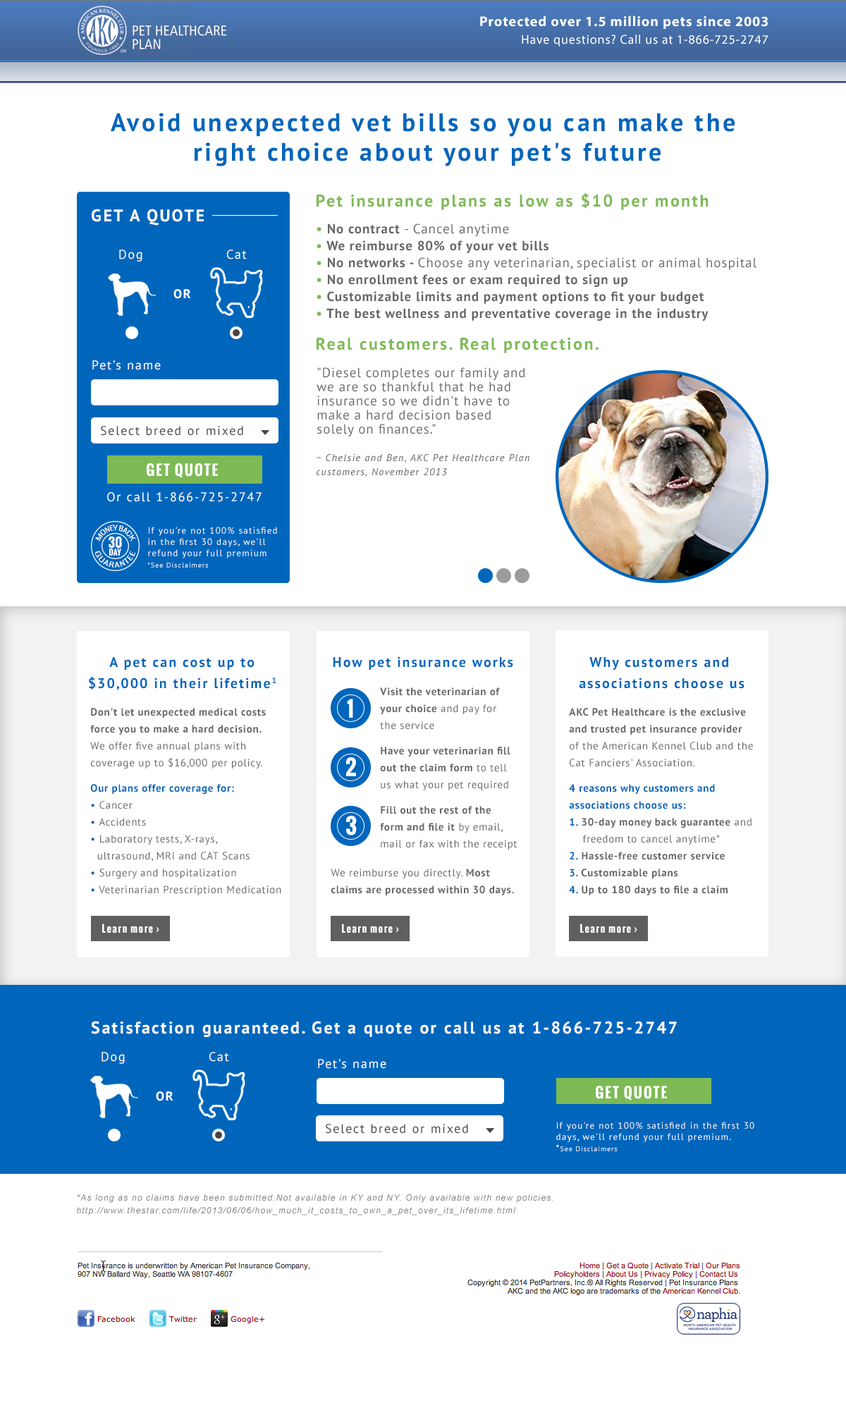
<style>
.page{position:relative;width:846px;height:1410px;background:#ffffff}
.page>*{position:absolute;margin:0}
.t1{font:14.1px "MyriadPro-Bold";letter-spacing:0.05em;color:#ffffff}
.t2{font:12.7px "MyriadPro-Regular";letter-spacing:0.05em;color:#ffffff}
.t3{font:25.4px/29.6px "PTSans-Bold";letter-spacing:0.1em;color:#0066bc}
.t4{font:16.9px "PTSans-Bold";letter-spacing:0.1em;color:#7dba55}
.t5{font:16.9px "PTSans-Bold";letter-spacing:0.1em;color:#ffffff}
.t6{font:13.4px/16.9px "PTSans-Bold";letter-spacing:0.05em;color:#666666}
.t7{font:13.4px/16.9px "PTSans-Bold";letter-spacing:0.05em;color:#7dba55}
.t8{font:13.4px/16.9px "PTSans-Regular";letter-spacing:0.05em;color:#666666}
.t9{font:12.7px "PTSans-Regular";letter-spacing:0.1em;color:#ffffff}
.t10{font:12.7px "PTSans-Bold";letter-spacing:0.1em;color:#ffffff}
.t11{font:13.4px/14.1px "PTSans-Regular";letter-spacing:0.05em;color:#666666}
.t12{font:12.7px "PTSans-Regular";letter-spacing:0.1em;color:#464646}
.t13{font:9.9px/14.1px "PTSans-Italic";letter-spacing:0.1em;color:#666666}
.t14{font:14.1px "Oswald-Bold";letter-spacing:0.1em;color:#ffffff}
.t15{font:6.3px/16.9px "Oswald-Light";color:#ffffff;scale:0.97 1}
.t16{font:9.2px/11.3px "PTSans-Regular";letter-spacing:0.1em;color:#ffffff}
.t17{font:7px/11.3px "PTSans-Regular";letter-spacing:0.1em;color:#ffffff}
.t18{font:12.7px "Oswald-Bold";letter-spacing:0.01em;color:#ffffff}
.t19{font:6.3px/16.9px "Oswald-Light";letter-spacing:0.05em;color:#ffffff}
.t20{font:7.8px "Oswald-Bold";letter-spacing:0.01em;color:#ffffff}
.t21{font:14.1px/21.1px "PTSans-Bold";letter-spacing:0.1em;color:#0066bc}
.t22{font:14.1px "PTSans-Bold";letter-spacing:0.1em;color:#0066bc}
.t23{font:10.6px/16.9px "PTSans-Regular";letter-spacing:0.05em;color:#666666}
.t24{font:10.6px/16.9px "PTSans-Bold";letter-spacing:0.05em;color:#666666}
.t25{font:10.6px/25.4px "PTSans-Bold";letter-spacing:0.05em;color:#666666}
.t26{font:21.1px "Oswald-Bold";letter-spacing:0.05em;color:#ffffff}
.t27{font:10.6px/25.4px "PTSans-Bold";letter-spacing:0.05em;color:#0066bc}
.t28{font:10.6px/16.9px "PTSans-Regular";letter-spacing:0.05em;color:#0066bc}
.t29{font:10.6px/16.9px "PTSans-Bold";letter-spacing:0.05em;color:#0066bc}
.t30{font:9.9px "Oswald-Bold";letter-spacing:0.1em;color:#ffffff}
.t31{font:8.5px/12.7px "Arial-ItalicMT";letter-spacing:0.1em;color:#7c7c7c}
</style>
<div class="page">
<p class="t1" style="left:480px;top:16px;width:288px;height:13px">Protected over 1.5 million pets since 2003</p>
<p class="t2" style="left:522px;top:35px;width:246px;height:12px">Have questions? Call us at 1-866-725-2747</p>
<p class="t3" style="left:111px;top:113px;width:623px;height:53px;text-align:center">Avoid unexpected vet bills so you can make the <br>right choice about your pet's future</p>
<p class="t4" style="left:316px;top:193px;width:392px;height:17px">Pet insurance plans as low as $10 per month</p>
<p class="t5" style="left:92px;top:209px;width:112px;height:17px">GET A QUOTE</p>
<p class="t6" style="left:316px;top:223px;width:440px;height:98px"><span class="t7">• </span>No contract <span class="t8">- Cancel anytime<br></span><span class="t7">• </span>We reimburse 80% of your vet bills<br><span class="t7">• </span>No networks - <span class="t8">Choose any veterinarian, specialist or animal hospital<br></span><span class="t7">• </span>No enrollment fees or exam required to sign up<br><span class="t7">• </span>Customizable limits and payment options to fit your budget<br><span class="t7">• </span>The best wellness and preventative coverage in the industry</p>
<p class="t9" style="left:119px;top:250px;width:23px;height:12px">Dog</p>
<p class="t9" style="left:227px;top:250px;width:20px;height:9px">Cat</p>
<p class="t10" style="left:173px;top:289px;width:18px;height:10px">OR</p>
<p class="t4" style="left:316px;top:338px;width:282px;height:15px">Real customers. Real protection.</p>
<p class="t9" style="left:92px;top:360px;width:69px;height:10px">Pet’s name</p>
<p class="t11" style="left:316px;top:367px;width:209px;height:69px"><span class="t8"><br></span>"Diesel completes our family and<br>we are so thankful that he had <br>insurance so we didn't have to <br>make a hard decision based <br>solely on finances."</p>
<p class="t12" style="left:101px;top:426px;width:142px;height:10px">Select breed or mixed</p>
<p class="t13" style="left:316px;top:454px;width:213px;height:23px">~ Chelsie and Ben, AKC Pet Healthcare Plan <br>customers, November 2013</p>
<p class="t14" style="left:147px;top:463px;width:71px;height:15px">GET QUOTE</p>
<p class="t9" style="left:107px;top:492px;width:155px;height:10px">Or call 1-866-725-2747</p>
<p class="t15" style="left:95px;top:524px;width:41px;height:17px">MONEY BACK</p>
<p class="t16" style="left:148px;top:527px;width:129px;height:40px">If you're not 100% satisfied <br>in the first 30 days, we'll <br>refund your full premium <br><span class="t17">*See Disclaimers</span></p>
<p class="t18" style="left:109px;top:536px;width:13px;height:12px">30</p>
<p class="t19" style="left:95px;top:551px;width:41px;height:16px">GUARANTEE</p>
<p class="t20" style="left:109px;top:548px;width:12px;height:7px">DAY</p>
<p class="t21" style="left:89px;top:657px;width:187px;height:33px;text-align:center">A pet can cost up to <br>$30,000 in their lifetime1</p>
<p class="t22" style="left:333px;top:656px;width:180px;height:14px">How pet insurance works</p>
<p class="t21" style="left:579px;top:657px;width:165px;height:32px;text-align:center">Why customers and <br>associations choose us</p>
<p class="t23" style="left:380px;top:687px;width:137px;height:162px"><span class="t24">Visit the veterinarian of<br>your choice </span>and pay for <br>the service  <br><span class="t25">Have your veterinarian fill <br></span><span class="t24">out the claim form</span> to tell <br>us what your pet required<br><span class="t25">Fill out the rest of the <br></span><span class="t24">form and file it</span> by email, <br>mail or fax with the receipt</p>
<p class="t26" style="left:347px;top:699px;width:6px;height:19px">1</p>
<p class="t24" style="left:90px;top:708px;width:191px;height:187px">Don't let unexpected medical costs <br>force you to make a hard decision. <br><span class="t23">We offer five annual plans with <br>coverage up to $16,000 per policy.<br></span><span class="t27">Our plans offer coverage for:<br></span><span class="t28">• </span><span class="t23">Cancer <br></span><span class="t28">• </span><span class="t23">Accidents<br></span><span class="t28">• </span><span class="t23">Laboratory tests, X-rays, <br>  ultrasound, MRI and CAT Scans<br></span><span class="t28">• </span><span class="t23">Surgery and hospitalization<br></span><span class="t28">• </span><span class="t23">Veterinarian Prescription Medication</span></p>
<p class="t24" style="left:569px;top:708px;width:184px;height:187px">AKC Pet Healthcare is the exclusive <br>and trusted pet insurance provider<span class="t23"> <br>of the American Kennel Club and the <br>Cat Fanciers' Association. <br></span><span class="t27">4 reasons why customers and <br></span><span class="t29">associations choose us: <br>1. </span>30-day money back guarantee<span class="t23"> and <br>    freedom to cancel anytime*<br></span><span class="t29">2. </span>Hassle-free customer service<br><span class="t29">3.</span> Customizable plans <br><span class="t29">4.</span> Up to 180 days to file a claim</p>
<p class="t26" style="left:346px;top:757px;width:10px;height:19px">2</p>
<p class="t26" style="left:346px;top:816px;width:11px;height:19px">3</p>
<p class="t24" style="left:331px;top:868px;width:183px;height:27px"><span class="t23">We reimburse you directly. </span>Most <br>claims are processed within 30 days.</p>
<p class="t30" style="left:102px;top:923px;width:57px;height:10px">Learn more ›</p>
<p class="t30" style="left:342px;top:923px;width:57px;height:10px">Learn more ›</p>
<p class="t30" style="left:580px;top:923px;width:57px;height:10px">Learn more ›</p>
<p class="t5" style="left:91px;top:1021px;width:586px;height:16px">Satisfaction guaranteed. Get a quote or call us at 1-866-725-2747</p>
<p class="t9" style="left:102px;top:1052px;width:23px;height:12px">Dog</p>
<p class="t9" style="left:209px;top:1052px;width:20px;height:10px">Cat</p>
<p class="t9" style="left:318px;top:1059px;width:68px;height:10px">Pet’s name</p>
<p class="t14" style="left:596px;top:1086px;width:71px;height:14px">GET QUOTE</p>
<p class="t10" style="left:156px;top:1091px;width:17px;height:10px">OR</p>
<p class="t16" style="left:556px;top:1121px;width:198px;height:30px">If you're not 100% satisfied in the first 30 <br>days, we'll refund your full premium.<br>*<span class="t17">See Disclaimers</span></p>
<p class="t12" style="left:326px;top:1124px;width:142px;height:9px">Select breed or mixed</p>
<p class="t31" style="left:77px;top:1194px;width:476px;height:21px">*As long as no claims have been submitted.Not available in KY and NY. Only available with new policies.<br>http://www.thestar.com/life/2013/06/06/how_much_it_costs_to_own_a_pet_over_its_lifetime.html</p>
</div>
